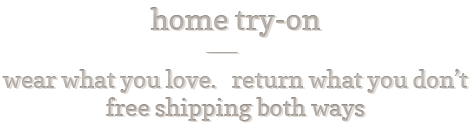
<style>
.page{position:relative;width:472px;height:125px;background:#ffffff}
.page>*{position:absolute;margin:0}
.t1{font:30px "Copse";color:#bdb6b1}
.t2{font:24px "Copse";color:#bdb6b1}
</style>
<div class="page">
<p class="t1" style="left:150px;top:7px;width:171px;height:30px">home try-on</p>
<p class="t2" style="left:2px;top:69px;width:466px;height:53px;text-align:center"><span class="t1"><br></span> <br>wear what you love.   return what you don’t<br>free shipping both ways</p>
</div>
